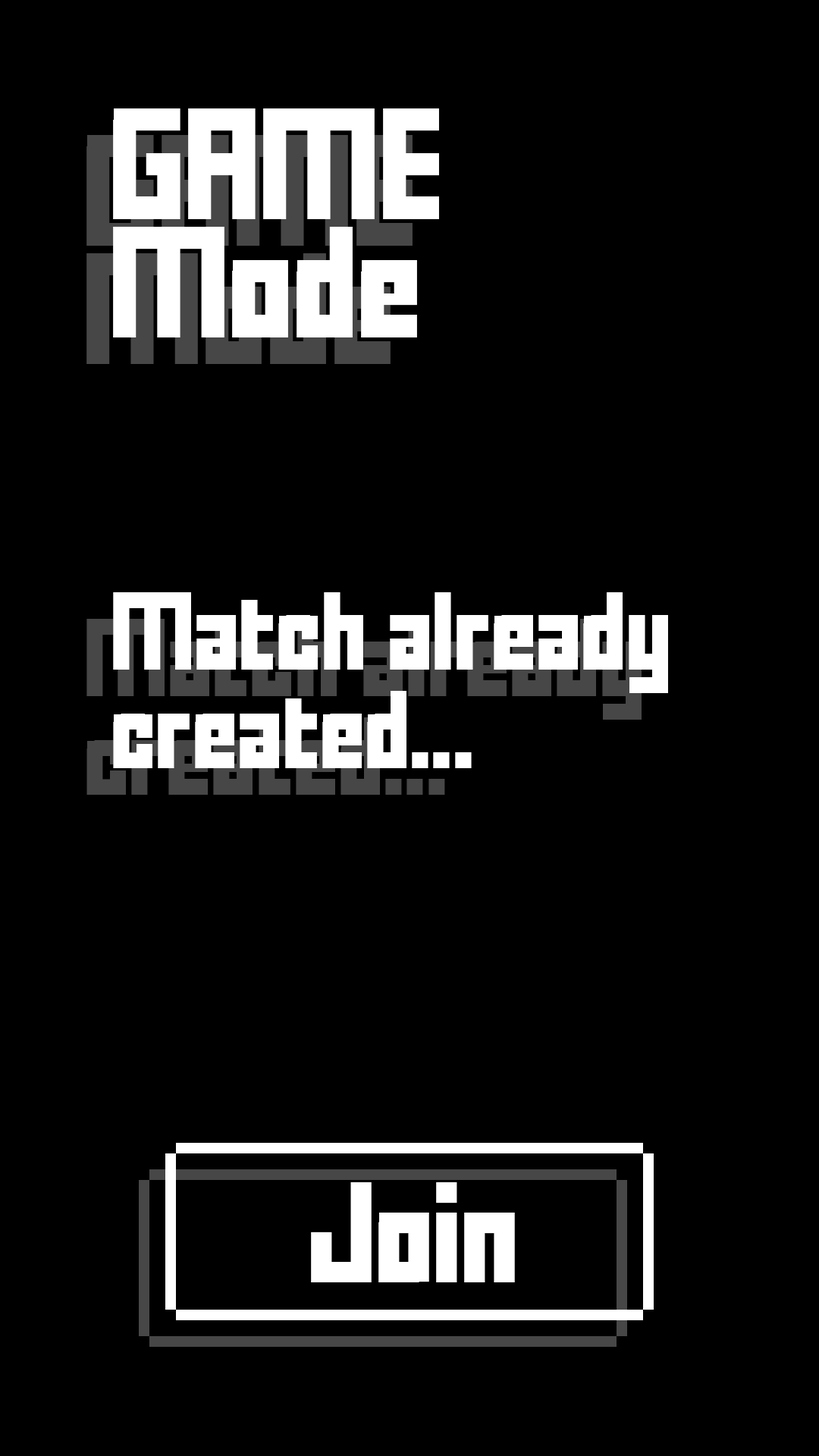
<style>
.page{position:relative;width:819px;height:1456px;background:#000000}
.page>*{position:absolute;margin:0}
.t1{font:151.7px/59.1px "FFFForward";letter-spacing:-0.025em;color:#ffffff}
.t2{font:106.2px/98.6px "FFFForward";letter-spacing:-0.025em;color:#ffffff}
.t3{font:136.6px "FFFForward";letter-spacing:-0.025em;color:#ffffff}
</style>
<div class="page">
<p class="t1" style="left:113px;top:108px;width:326px;height:229px">GAME<br><br>Mode</p>
<p class="t2" style="left:113px;top:592px;width:555px;height:176px">Match already<br>created...</p>
<p class="t3" style="left:311px;top:1182px;width:204px;height:100px">Join</p>
</div>
